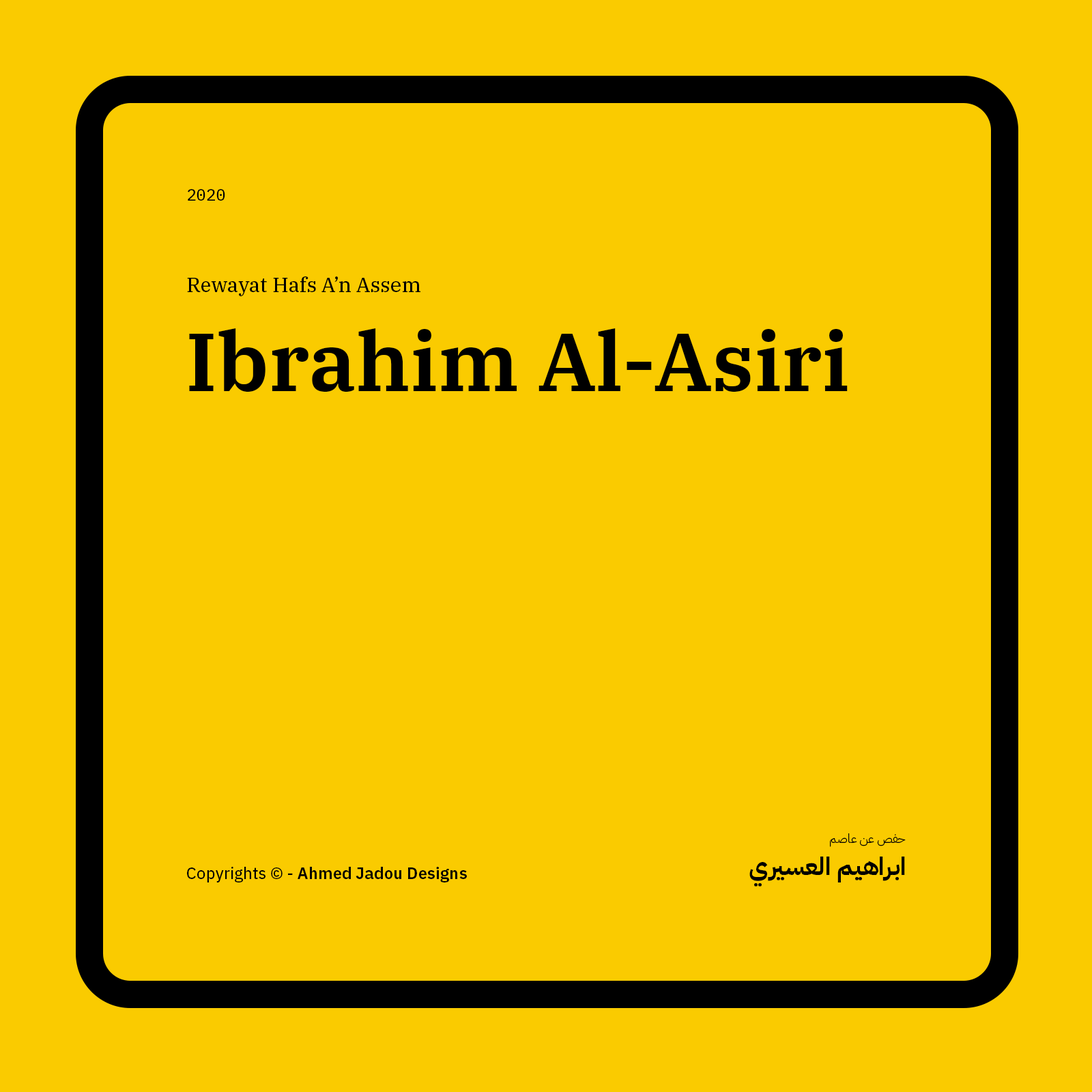
<style>
.page{position:relative;width:1092px;height:1092px;background:#facb00}
.page>*{position:absolute;margin:0}
.t1{font:16.4px "IBMPlexMono-Text";color:#000000}
.t2{font:20.5px "IBMPlexSerif-Text";color:#000000}
.t3{font:81.9px "IBMPlexSerif-SemiBold";color:#000000}
.t4{font:12.3px "IBMPlexArabic-Light";color:#000000}
.t5{font:24.6px "IBMPlexArabic-Bold";color:#000000}
.t6{font:16.4px "IBMPlexSans-SemiBold";color:#000000}
.t7{font:16.4px "IBMPlexSans-Text";color:#000000}
</style>
<div class="page">
<p class="t1" style="left:188px;top:189px;width:37px;height:12px">2020</p>
<p class="t2" style="left:187px;top:276px;width:233px;height:20px">Rewayat Hafs A’n Assem</p>
<p class="t3" style="left:189px;top:328px;width:659px;height:64px">Ibrahim Al-Asiri</p>
<p class="t4" style="left:830px;top:833px;width:76px;height:14px">حفص عن عاصم</p>
<p class="t5" style="left:749px;top:857px;width:156px;height:30px">ابراهيم العسيري</p>
<p class="t6" style="left:187px;top:867px;width:280px;height:15px"><span class="t7">Copyrights © - </span>Ahmed Jadou Designs</p>
</div>
